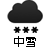
<style>
.page{position:relative;width:50px;height:48px;background:#ffffff}
.page>*{position:absolute;margin:0}
.t1{font:12px "OPPOSans-R";color:#000000}
</style>
<div class="page">
<p class="t1" style="left:14px;top:36px;width:22px;height:11px">中雪</p>
</div>
